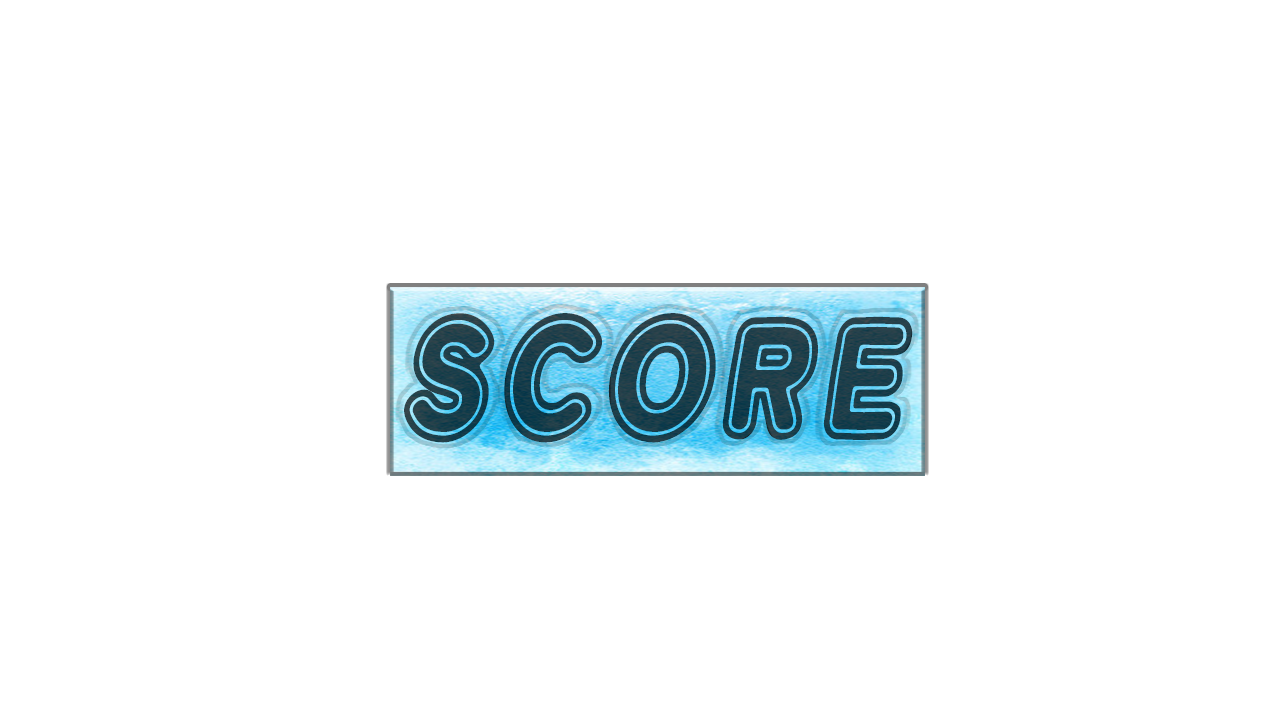
<style>
.page{position:relative;width:1280px;height:720px;background:#ffffff}
.page>*{position:absolute;margin:0}
.t1{font:170.5px "DokiDokiFantasia";letter-spacing:0.05em;color:#1e3f4a;font-style:italic;scale:0.89 1}
</style>
<div class="page">
<p class="t1" style="left:404px;top:313px;width:509px;height:130px">SCORE</p>
</div>
